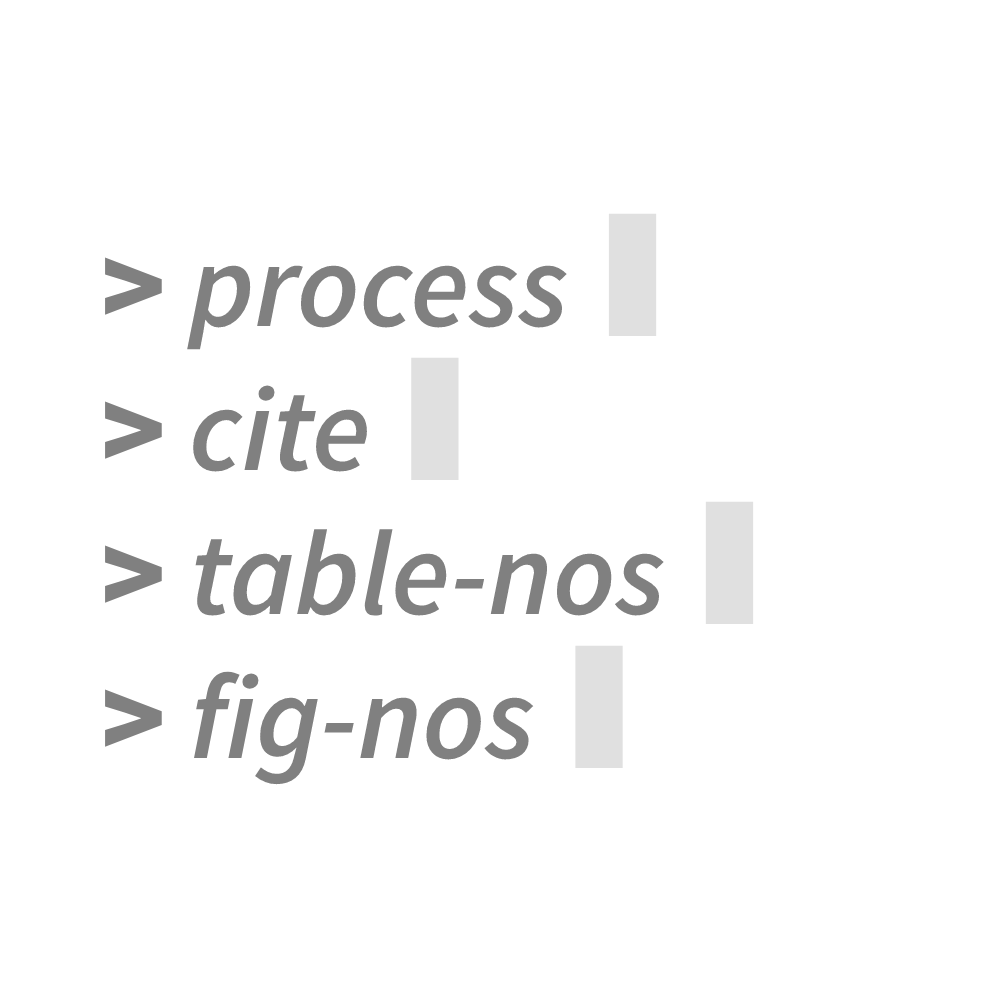
<style>
.page{position:relative;width:1000px;height:1000px;background:#ffffff}
.page>*{position:absolute;margin:0}
.t1{font:120px "SourceSansPro-SemiBoldItalic";color:#808080}
.t2{font:120px "SourceSansPro-Black";color:#808080}
.t3{font:120px "DejaVuSans-Bold";color:#e0e0e0}
</style>
<div class="page">
<p class="t1" style="left:105px;top:213px;width:649px;height:572px"><span class="t2">&gt; </span>process <span class="t3">▌<br></span><span class="t2">&gt; </span>cite<span class="t3"> ▌<br></span><span class="t2">&gt; </span>table-nos<span class="t3"> ▌<br></span><span class="t2">&gt; </span>fig-nos <span class="t3">▌</span></p>
</div>
